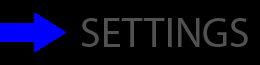
<style>
.page{position:relative;width:260px;height:65px;background:#000000}
.page>*{position:absolute;margin:0}
.t1{font:41.7px "MyriadPro-Regular";color:#515151}
</style>
<div class="page">
<p class="t1" style="left:81px;top:18px;width:167px;height:29px">SETTINGS</p>
</div>
